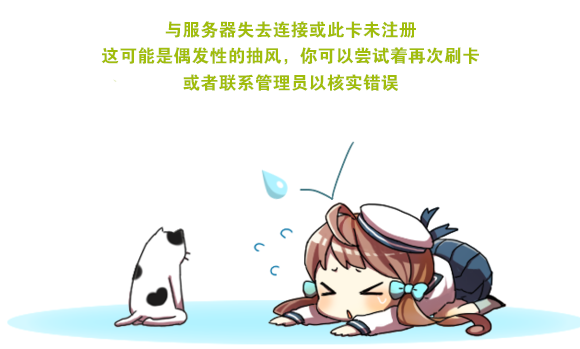
<style>
.page{position:relative;width:580px;height:349px;background:#ffffff}
.page>*{position:absolute;margin:0}
.t1{font:13.5px "FZDHTK--GBK1-0";color:#a1bd0b}
</style>
<div class="page">
<p class="t1" style="left:101px;top:21px;width:378px;height:70px;text-align:center">与服务器失去连接或此卡未注册<br>这可能是偶发性的抽风，你可以尝试着再次刷卡<br>或者联系管理员以核实错误</p>
</div>
